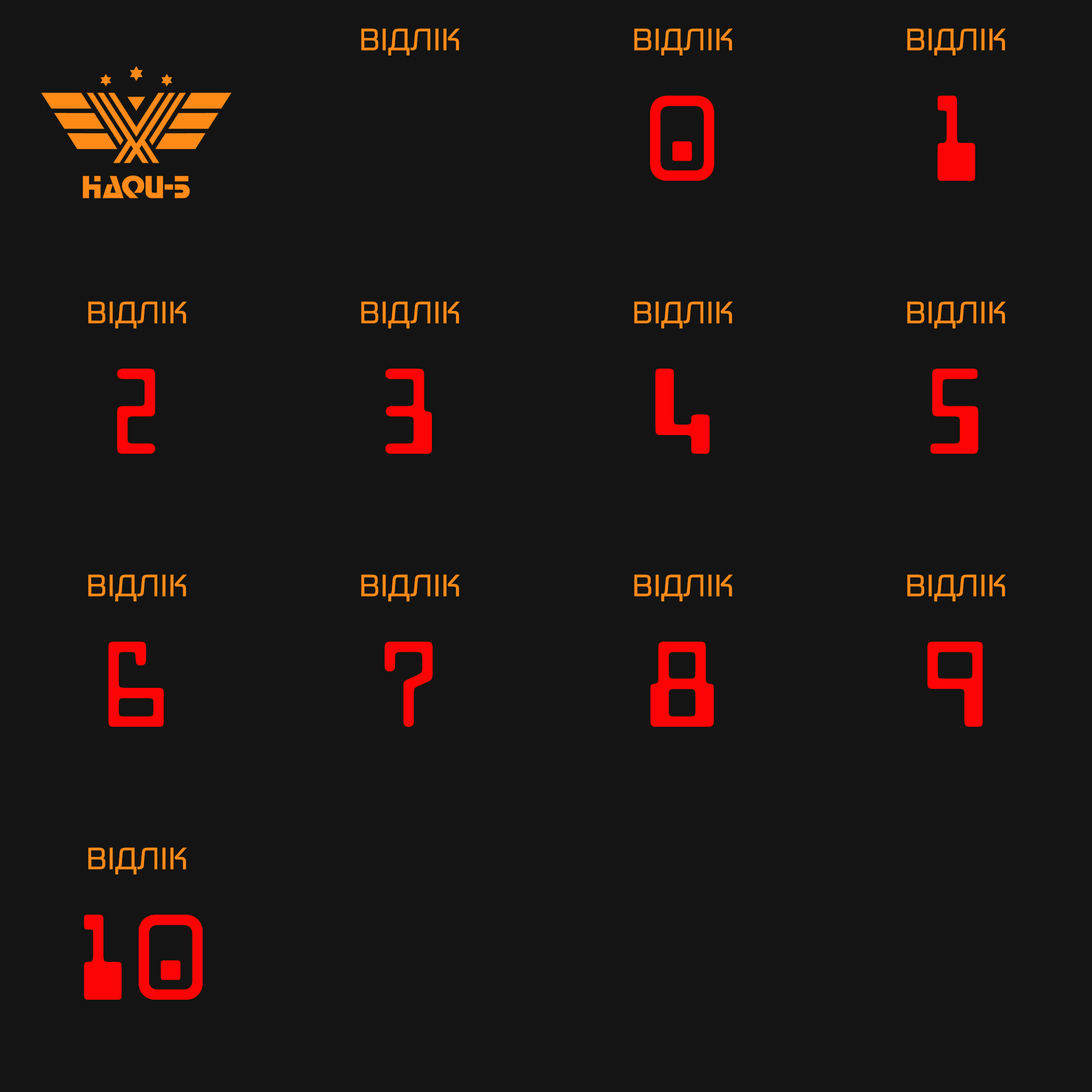
<style>
.page{position:relative;width:1092px;height:1092px;background:#131413}
.page>*{position:absolute;margin:0}
.t1{font:32.2px "DigitalSansNowMLPro-Reg";color:#ff8a18}
</style>
<div class="page">
<p class="t1" style="left:361px;top:28px;width:99px;height:27px">ВІДЛІК</p>
<p class="t1" style="left:634px;top:28px;width:99px;height:27px">ВІДЛІК</p>
<p class="t1" style="left:907px;top:28px;width:99px;height:27px">ВІДЛІК</p>
<p class="t1" style="left:88px;top:301px;width:99px;height:27px">ВІДЛІК</p>
<p class="t1" style="left:361px;top:301px;width:99px;height:27px">ВІДЛІК</p>
<p class="t1" style="left:634px;top:301px;width:99px;height:27px">ВІДЛІК</p>
<p class="t1" style="left:907px;top:301px;width:99px;height:27px">ВІДЛІК</p>
<p class="t1" style="left:88px;top:574px;width:99px;height:27px">ВІДЛІК</p>
<p class="t1" style="left:361px;top:574px;width:99px;height:27px">ВІДЛІК</p>
<p class="t1" style="left:634px;top:574px;width:99px;height:27px">ВІДЛІК</p>
<p class="t1" style="left:907px;top:574px;width:99px;height:27px">ВІДЛІК</p>
<p class="t1" style="left:88px;top:847px;width:99px;height:27px">ВІДЛІК</p>
</div>
